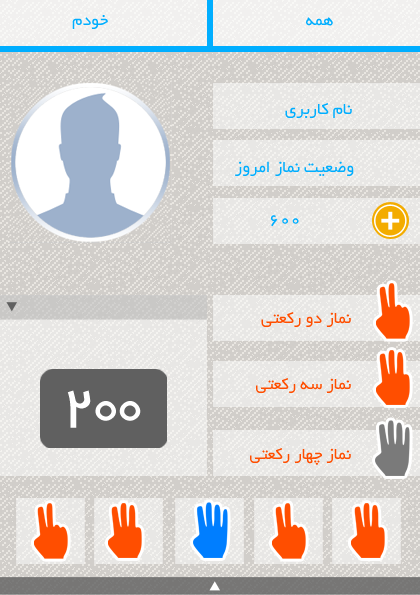
<style>
.page{position:relative;width:420px;height:595px;background:#e8e7e5}
.page>*{position:absolute;margin:0}
.t1{font:18px "BYekan";color:#00aeff}
.t2{font:18px "BYekan";color:#ff4e00}
.t3{font:65.3px "BYekan";color:#ffffff}
</style>
<div class="page">
<p class="t1" style="left:72px;top:15px;width:36px;height:14px">خودم</p>
<p class="t1" style="left:306px;top:17px;width:27px;height:9px">همه</p>
<p class="t1" style="left:285px;top:103px;width:67px;height:15px">نام کاربری</p>
<p class="t1" style="left:235px;top:161px;width:119px;height:15px">وضعیت نماز امروز</p>
<p class="t1" style="left:271px;top:215px;width:28px;height:12px">600</p>
<p class="t2" style="left:261px;top:312px;width:90px;height:15px">نماز دو رکعتی</p>
<p class="t3" style="left:67px;top:390px;width:74px;height:38px">200</p>
<p class="t2" style="left:256px;top:378px;width:95px;height:15px">نماز سه رکعتی</p>
<p class="t2" style="left:250px;top:448px;width:101px;height:17px">نماز چهار رکعتی</p>
</div>
